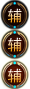
<style>
.page{position:relative;width:30px;height:89px}
.page>*{position:absolute;margin:0}
.t1{font:15px "SimHei";letter-spacing:0.05em}
</style>
<div class="page">
<p class="t1" style="left:8px;top:8px;width:14px;height:15px">辅</p>
<p class="t1" style="left:8px;top:37px;width:14px;height:15px">辅</p>
<p class="t1" style="left:8px;top:68px;width:14px;height:15px">辅</p>
</div>
